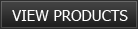
<style>
.page{position:relative;width:138px;height:29px}
.page>*{position:absolute;margin:0}
.t1{font:15px "Tahoma";color:#ffffff}
</style>
<div class="page">
<p class="t1" style="left:12px;top:10px;width:116px;height:11px">VIEW PRODUCTS</p>
</div>
